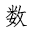
<style>
.page{position:relative;width:32px;height:32px;background:#ffffff}
.page>*{position:absolute;margin:0}
.t1{font:24px "FangSong";letter-spacing:0.05em;color:#000000;text-transform:uppercase}
</style>
<div class="page">
<p class="t1" style="left:5px;top:4px;width:22px;height:24px">数</p>
</div>
